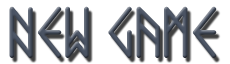
<style>
.page{position:relative;width:230px;height:64px;background:#ffffff}
.page>*{position:absolute;margin:0}
.t1{font:64px "ComicRunes";color:#4a5363}
</style>
<div class="page">
<p class="t1" style="left:9px;top:6px;width:208px;height:52px">NEW GAME</p>
</div>
